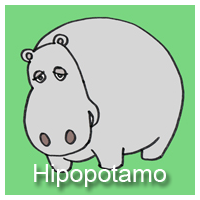
<style>
.page{position:relative;width:200px;height:200px;background:#d6d6d6}
.page>*{position:absolute;margin:0}
.t1{font:25px "ArialMT";color:#ffffff}
</style>
<div class="page">
<p class="t1" style="left:34px;top:164px;width:132px;height:23px">Hipopotamo</p>
</div>
